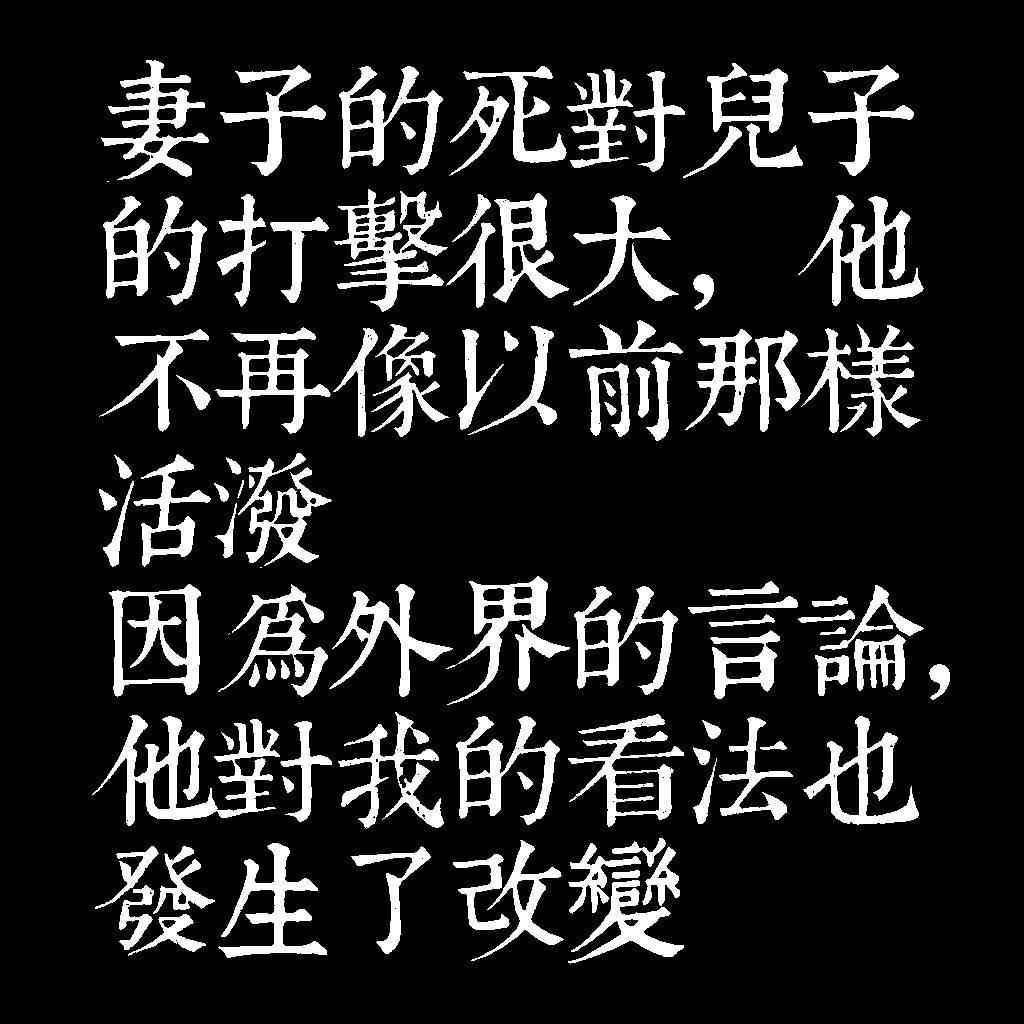
<style>
.page{position:relative;width:1024px;height:1024px;background:#000000}
.page>*{position:absolute;margin:0}
.t1{font:120px/130px "TpldKhangXiDictTrial";letter-spacing:-0.02em;color:#ffffff}
</style>
<div class="page">
<p class="t1" style="left:92px;top:60px;width:858px;height:904px">妻子的死對兒子<br>的打擊很大，他<br>不再像以前那樣<br>活潑<br>因為外界的言論，<br>他對我的看法也<br>發生了改變</p>
</div>
